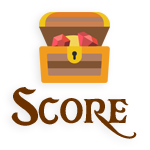
<style>
.page{position:relative;width:150px;height:150px;background:#ffffff}
.page>*{position:absolute;margin:0}
.t1{font:48px "skullsandcrossbones";color:#6b3200}
</style>
<div class="page">
<p class="t1" style="left:11px;top:87px;width:126px;height:52px">Score</p>
</div>
